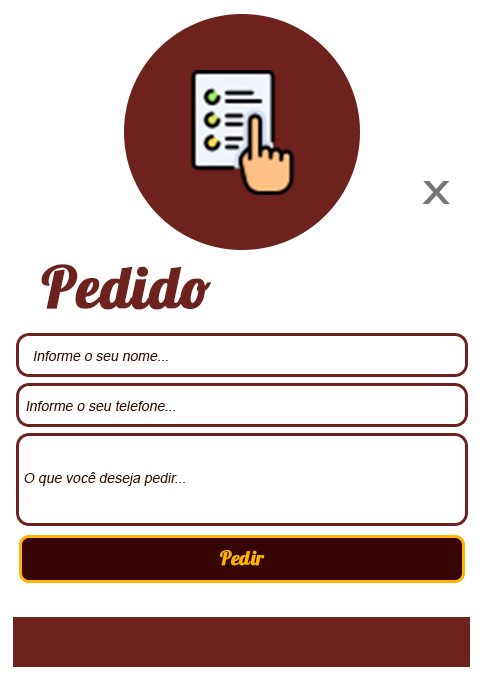
<style>
.page{position:relative;width:482px;height:687px;background:#ffffff}
.page>*{position:absolute;margin:0}
.t1{font:45px "ArialMT";color:#777676;scale:1.27 1}
.t2{font:58.1px "Lobster1.4";color:#6d221d;font-weight:bold}
.t3{font:14px "ArialMT";color:#391300;font-style:italic}
.t4{font:20px "Lobster1.4";color:#ffb400;font-weight:bold}
</style>
<div class="page">
<p class="t1" style="left:422px;top:181px;width:28px;height:23px">x</p>
<p class="t2" style="left:41px;top:264px;width:170px;height:46px">Pedido</p>
<p class="t3" style="left:33px;top:351px;width:135px;height:10px">Informe o seu nome...</p>
<p class="t3" style="left:26px;top:400px;width:150px;height:11px">Informe o seu telefone...</p>
<p class="t3" style="left:24px;top:472px;width:161px;height:14px">O que você deseja pedir...</p>
<p class="t4" style="left:220px;top:550px;width:45px;height:16px">Pedir</p>
</div>
